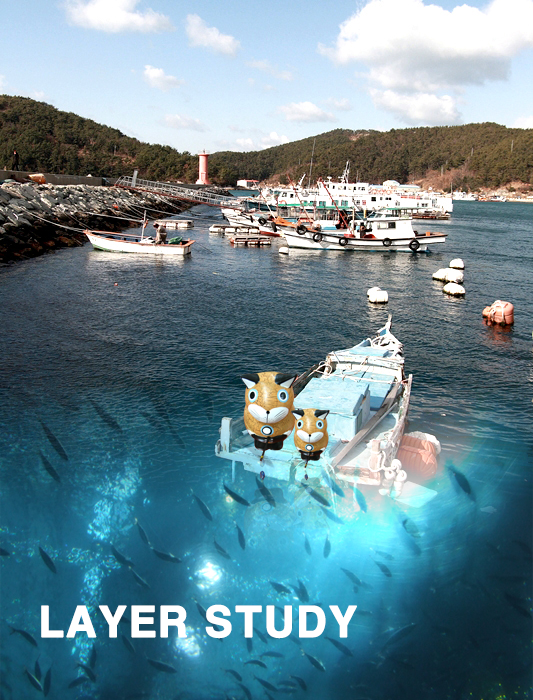
<style>
.page{position:relative;width:533px;height:700px}
.page>*{position:absolute;margin:0}
.t1{font:40px "H2gtrE";letter-spacing:-0.01em;color:#ffffff;font-weight:bold}
</style>
<div class="page">
<p class="t1" style="left:41px;top:604px;width:316px;height:35px">LAYER STUDY</p>
</div>
